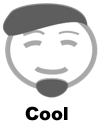
<style>
.page{position:relative;width:100px;height:130px;background:#ffffff}
.page>*{position:absolute;margin:0}
.t1{font:17.9px "Arial-Black";color:#000000}
</style>
<div class="page">
<p class="t1" style="left:25px;top:106px;width:43px;height:15px">Cool</p>
</div>
